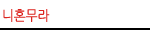
<style>
.page{position:relative;width:150px;height:30px;background:#ffffff}
.page>*{position:absolute;margin:0}
.t1{font:14px "NanumGothic";color:#dc241f;scale:0.9 1}
</style>
<div class="page">
<p class="t1" style="left:3px;top:9px;width:47px;height:13px">니혼무라</p>
</div>
